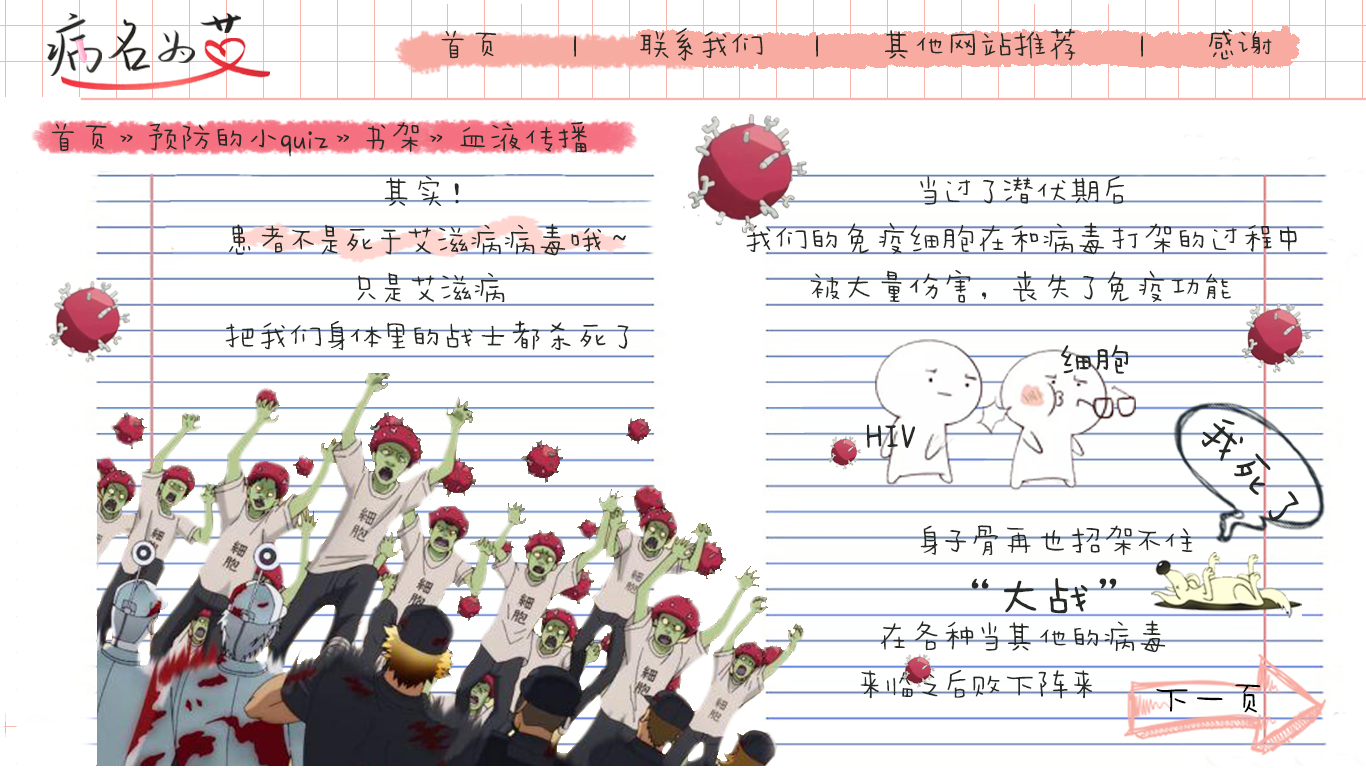
<style>
.page{position:relative;width:1366px;height:768px;background:#ffffff}
.page>*{position:absolute;margin:0}
.t1{font:33.3px "AaWanWan";color:#282a26}
.t2{font:33.3px/48px "AaWanWan";color:#282a26}
.t3{font:35px "AaWanWan";color:#282a26;font-weight:bold}
.t4{font:47px "AaWanWan";color:#282a26;font-weight:bold}
.t5{font:48px/48px "AaWanWan";color:#282a26;font-weight:bold}
.t6{font:39.9px "AaWanWan";letter-spacing:-0.05em;color:#000000}
</style>
<div class="page">
<p class="t1" style="left:441px;top:27px;width:831px;height:34px">首页       |      联系我们     |      其他网站推荐      |      感谢</p>
<p class="t1" style="left:51px;top:121px;width:536px;height:36px">首页》预防的小quiz》书架》血液传播</p>
<p class="t2" style="left:225px;top:176px;width:404px;height:175px;text-align:center">其实！<br>患者不是死于艾滋病病毒哦～<br>只是艾滋病<br>把我们身体里的战士都杀死了</p>
<p class="t2" style="left:746px;top:175px;width:551px;height:128px;text-align:center">当过了潜伏期后<br>我们的免疫细胞在和病毒打架的过程中<br>被大量伤害，丧失了免疫功能</p>
<p class="t3" style="left:1061px;top:344px;width:68px;height:30px">细胞</p>
<p class="t3" style="left:866px;top:424px;width:49px;height:24px">HIV</p>
<p class="t4" style="left:1201px;top:419px;width:98px;height:102px;rotate:48deg">我死了</p>
<p class="t2" style="left:860px;top:525px;width:333px;height:174px">身子骨再也招架不住<br>         <span class="t5">“大战”<br></span>  在各种当其他的病毒<br>来临之后败下阵来</p>
<p class="t6" style="left:1156px;top:684px;width:105px;height:29px">下一页</p>
</div>
